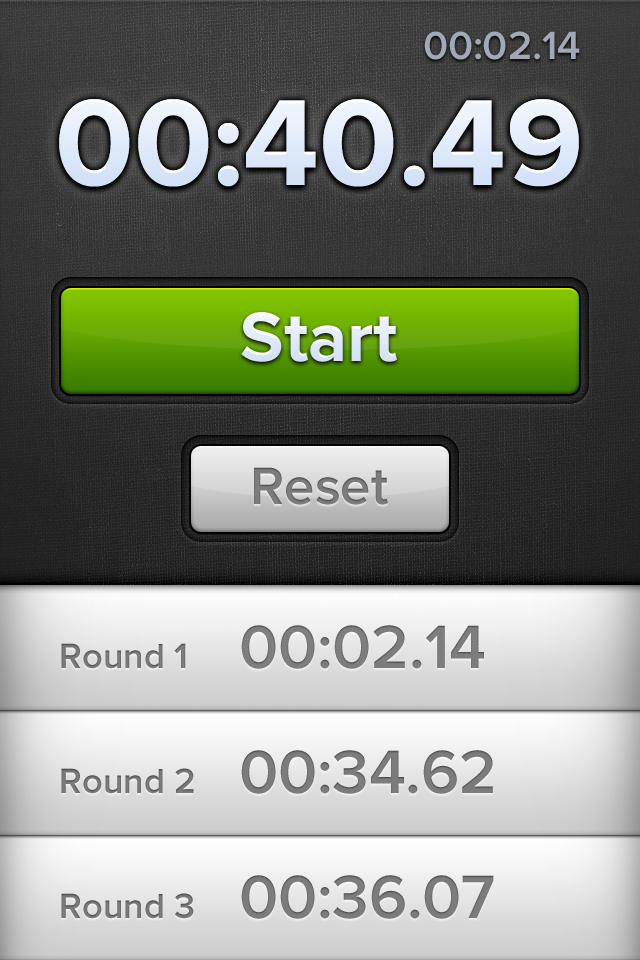
<style>
.page{position:relative;width:640px;height:960px}
.page>*{position:absolute;margin:0}
.t1{font:40.8px "ProximaNova-Semibold";color:#a0a9b5}
.t2{font:126.8px "ProximaNova-Bold";color:#e1ebfa}
.t3{font:72.4px "ProximaNova-Bold";color:#e1ebfa}
.t4{font:54.3px "ProximaNova-Semibold";color:#7c7c7c}
.t5{font:63.4px "ProximaNova-Semibold";color:#7c7c7c}
.t6{font:36.2px "ProximaNova-Semibold";color:#7c7c7c}
</style>
<div class="page">
<p class="t1" style="left:424px;top:31px;width:156px;height:29px">00:02.14</p>
<p class="t2" style="left:59px;top:99px;width:520px;height:88px">00:40.49</p>
<p class="t2" style="left:59px;top:99px;width:520px;height:88px">00:40.49</p>
<p class="t3" style="left:241px;top:312px;width:156px;height:50px">Start</p>
<p class="t4" style="left:254px;top:467px;width:134px;height:38px">Reset</p>
<p class="t5" style="left:61px;top:625px;width:423px;height:44px"><span class="t6">Round 1</span>  00:02.14</p>
<p class="t5" style="left:61px;top:750px;width:432px;height:44px"><span class="t6">Round 2</span>  00:34.62</p>
<p class="t5" style="left:61px;top:875px;width:433px;height:44px"><span class="t6">Round 3</span>  00:36.07</p>
</div>
